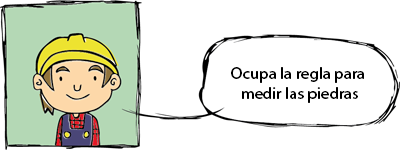
<style>
.page{position:relative;width:400px;height:150px;background:#ffffff}
.page>*{position:absolute;margin:0}
.t1{font:16.7px "MyriadHebrew-Regular";color:#000000}
</style>
<div class="page">
<p class="t1" style="left:231px;top:67px;width:133px;height:36px;text-align:center">Ocupa la regla para<br>medir las piedras</p>
</div>
